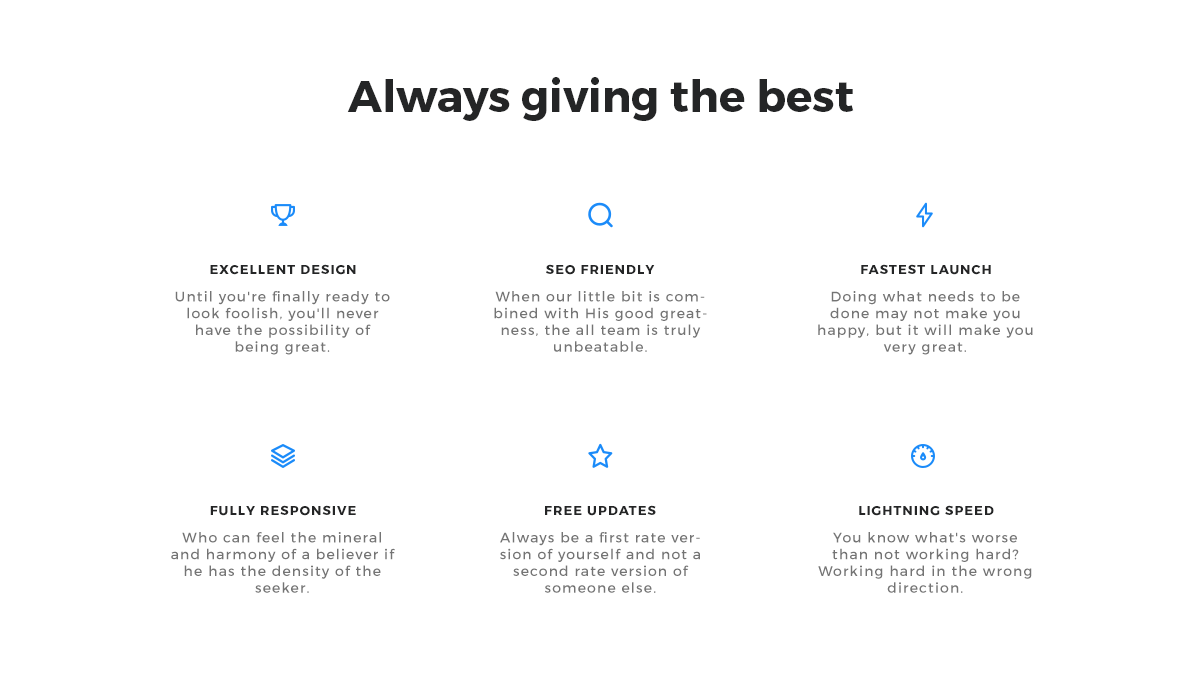
<style>
.page{position:relative;width:1200px;height:700px;background:#ffffff}
.page>*{position:absolute;margin:0}
.t1{font:44px "Montserrat-Bold";color:#242526}
.t2{font:13px "Montserrat-Bold";letter-spacing:0.08em;color:#242526;text-transform:uppercase}
.t3{font:14px "Montserrat-Regular";letter-spacing:0.08em;color:#747474}
</style>
<div class="page">
<p class="t1" style="left:347px;top:77px;width:507px;height:44px">Always giving the best</p>
<p class="t2" style="left:210px;top:264px;width:146px;height:11px">Excellent design</p>
<p class="t2" style="left:546px;top:264px;width:109px;height:11px">SEO Friendly</p>
<p class="t2" style="left:861px;top:264px;width:130px;height:11px">Fastest launch</p>
<p class="t3" style="left:175px;top:291px;width:215px;height:64px;text-align:center">Until you're finally ready to look foolish, you'll never have the possibility of being great.</p>
<p class="t3" style="left:494px;top:291px;width:213px;height:61px;text-align:center">When our little bit is combined with His good greatness, the all team is truly unbeatable.</p>
<p class="t3" style="left:818px;top:291px;width:215px;height:64px;text-align:center">Doing what needs to be done may not make you happy, but it will make you very great.</p>
<p class="t2" style="left:210px;top:505px;width:146px;height:11px">Fully Responsive</p>
<p class="t2" style="left:545px;top:505px;width:111px;height:11px">free updates</p>
<p class="t2" style="left:859px;top:505px;width:135px;height:11px">Lightning speed</p>
<p class="t3" style="left:171px;top:532px;width:224px;height:61px;text-align:center">Who can feel the mineral and harmony of a believer if he has the density of the seeker.</p>
<p class="t3" style="left:500px;top:532px;width:200px;height:61px;text-align:center">Always be a first rate version of yourself and not a second rate version of someone else.</p>
<p class="t3" style="left:818px;top:532px;width:214px;height:61px;text-align:center">You know what's worse than not working hard? Working hard in the wrong direction.</p>
</div>
